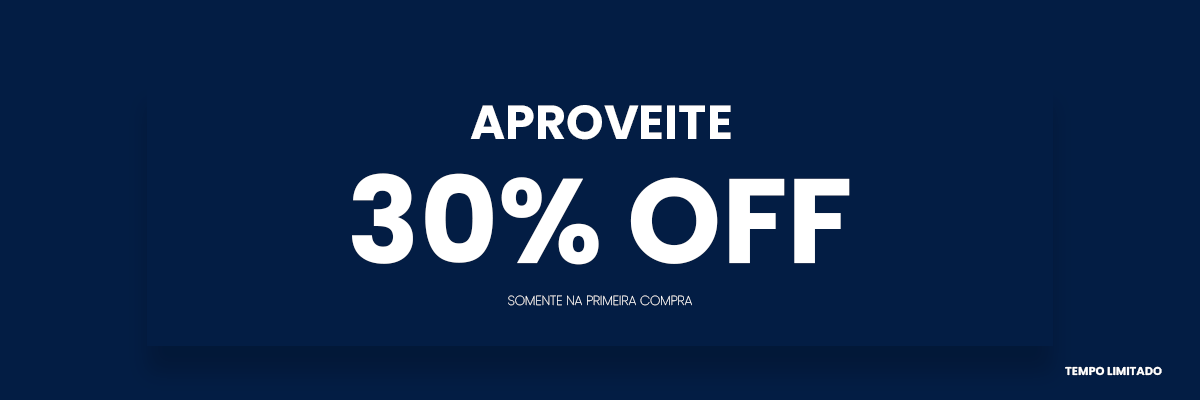
<style>
.page{position:relative;width:1200px;height:400px;background:#031d44}
.page>*{position:absolute;margin:0}
.t1{font:47.7px "Poppins-Bold";color:#ffffff}
.t2{font:119.8px "Poppins-Bold";color:#ffffff}
.t3{font:13px "Poppins-Thin";color:#ffffff}
.t4{font:11.4px "Poppins-Bold";color:#ffffff}
</style>
<div class="page">
<p class="t1" style="left:470px;top:105px;width:261px;height:35px">APROVEITE</p>
<p class="t2" style="left:352px;top:173px;width:498px;height:92px">30% OFF</p>
<p class="t3" style="left:508px;top:295px;width:184px;height:11px">SOMENTE NA PRIMEIRA COMPRA</p>
<p class="t4" style="left:1065px;top:366px;width:97px;height:10px">TEMPO LIMITADO</p>
</div>
